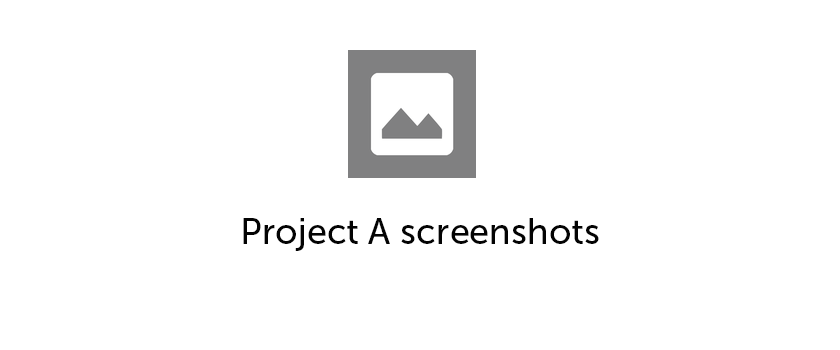
<style>
.page{position:relative;width:840px;height:350px;background:#ffffff}
.page>*{position:absolute;margin:0}
.t1{font:36px "MuseoSans-500";color:#030303}
</style>
<div class="page">
<p class="t1" style="left:243px;top:218px;width:356px;height:33px">Project A screenshots</p>
</div>
